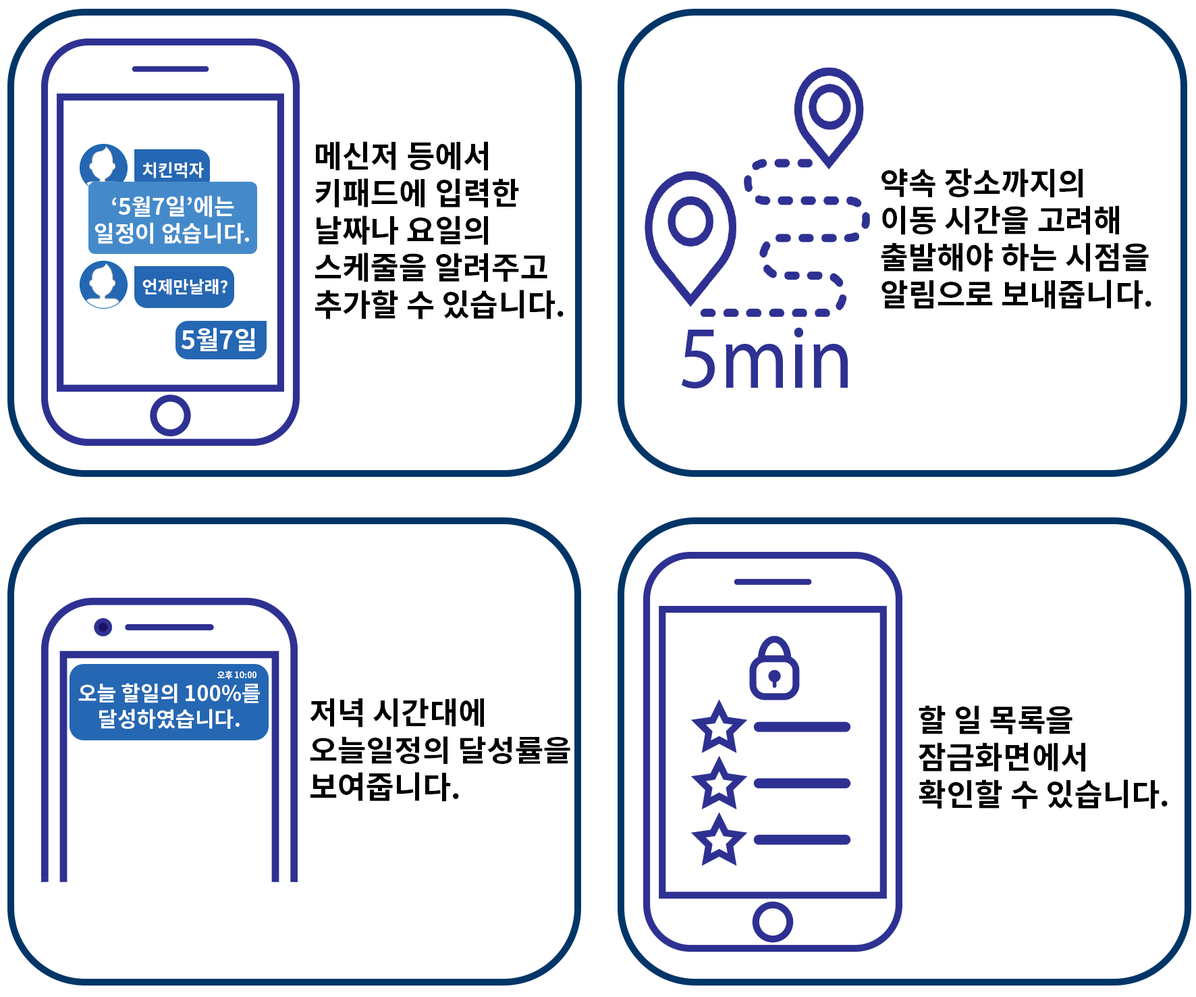
<style>
.page{position:relative;width:1196px;height:997px;background:#ffffff}
.page>*{position:absolute;margin:0}
.t1{font:30.9px "NotoSansCJKkr-Bold";color:#000000}
.t2{font:16.9px "NotoSansCJKkr-Bold";color:#ffffff}
.t3{font:22.5px "NotoSansCJKkr-Bold";color:#ffffff}
.t4{font:25.3px "NotoSansCJKkr-Bold";color:#ffffff}
.t5{font:8.4px "NotoSansCJKkr-Bold";color:#ffffff}
.t6{font:21.1px "NotoSansCJKkr-Bold";color:#ffffff}
.t7{font:29.4px "NotoSansCJKkr-Bold";color:#000000;scale:1.05 1}
</style>
<div class="page">
<p class="t1" style="left:315px;top:141px;width:249px;height:178px">메신저 등에서<br>키패드에 입력한<br>날짜나 요일의 <br>스케줄을 알려주고<br>추가할 수 있습니다.</p>
<p class="t2" style="left:142px;top:162px;width:62px;height:16px">치킨먹자</p>
<p class="t1" style="left:881px;top:168px;width:271px;height:141px">약속 장소까지의 <br>이동 시간을 고려해 <br>출발해야 하는 시점을 <br>알림으로 보내줍니다.</p>
<p class="t3" style="left:95px;top:195px;width:154px;height:49px;text-align:center">‘5월7일’에는<br>일정이 없습니다.</p>
<p class="t2" style="left:142px;top:278px;width:86px;height:17px">언제만날래?</p>
<p class="t4" style="left:181px;top:327px;width:74px;height:24px">5월7일</p>
<p class="t5" style="left:217px;top:670px;width:40px;height:9px">오후 10:00</p>
<p class="t6" style="left:78px;top:683px;width:182px;height:46px;text-align:center">오늘 할일의 100%를<br>달성하였습니다.</p>
<p class="t7" style="left:310px;top:697px;width:261px;height:104px"><span class="t1">저녁 시간대에 <br></span>오늘일정의 달성률을<br><span class="t1">보여줍니다.</span></p>
<p class="t1" style="left:919px;top:705px;width:249px;height:104px">할 일 목록을<br>잠금화면에서<br>확인할 수 있습니다.</p>
</div>
